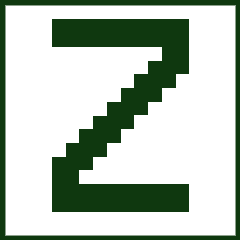
<style>
.page{position:relative;width:240px;height:240px;background:#ffffff}
.page>*{position:absolute;margin:0}
.t1{font:282px "VCROSDMono";color:#0f380f}
</style>
<div class="page">
<p class="t1" style="left:52px;top:19px;width:137px;height:193px">Z</p>
</div>
